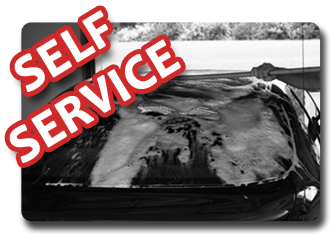
<style>
.page{position:relative;width:335px;height:235px}
.page>*{position:absolute;margin:0}
.t1{font:50.4px "Candara-Bold";color:#ffffff;font-weight:bold}
</style>
<div class="page">
<p class="t1" style="left:9px;top:10px;width:172px;height:153px;text-align:center;rotate:-31deg">SELF <br>SERVICE</p>
</div>
